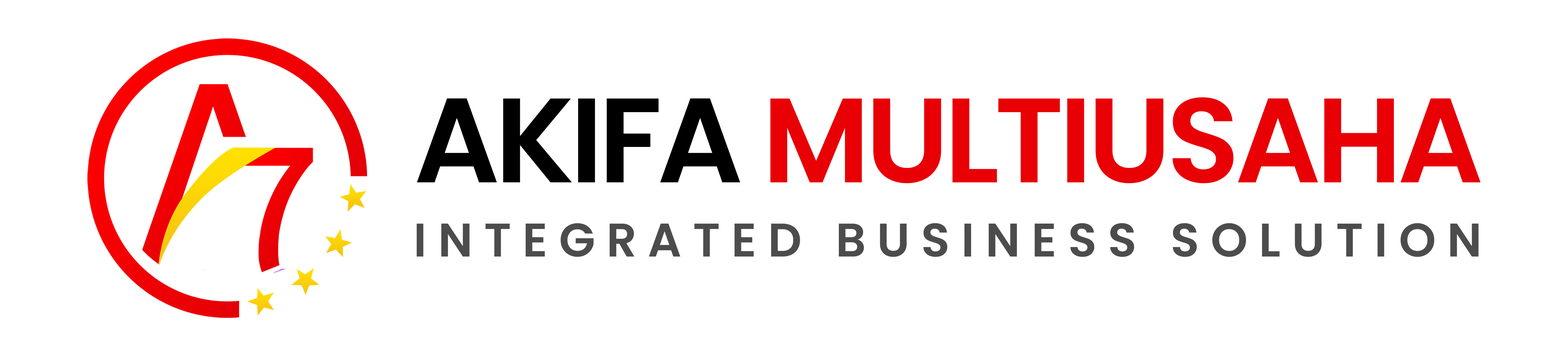
<style>
.page{position:relative;width:1568px;height:356px;background:#ffffff}
.page>*{position:absolute;margin:0}
.t1{font:120.1px "Poppins-SemiBold";letter-spacing:-0.04em;color:#e80005}
.t2{font:120.1px "Poppins-SemiBold";letter-spacing:-0.04em;color:#000000}
.t3{font:47.1px "Poppins-SemiBold";letter-spacing:0.24em;color:#4c4c4c}
</style>
<div class="page">
<p class="t1" style="left:417px;top:97px;width:1064px;height:87px"><span class="t2">AKIFA </span>MULTIUSAHA</p>
<p class="t3" style="left:416px;top:223px;width:1063px;height:34px">INTEGRATED BUSINESS SOLUTION</p>
</div>
